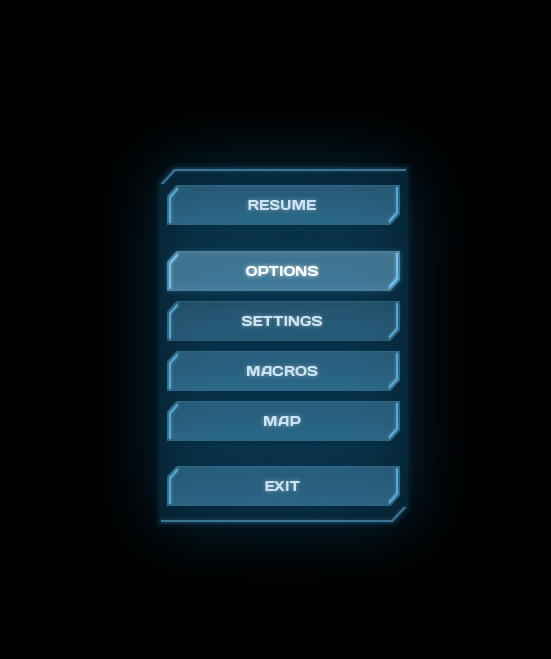
<style>
.page{position:relative;width:551px;height:659px;background:#000000}
.page>*{position:absolute;margin:0}
.t1{font:14px "Days";color:#cbe3f0;text-transform:uppercase}
.t2{font:14px "Days";color:#f9fdff;text-transform:uppercase}
</style>
<div class="page">
<p class="t1" style="left:248px;top:200px;width:68px;height:10px">Resume</p>
<p class="t2" style="left:246px;top:266px;width:72px;height:10px">Options</p>
<p class="t1" style="left:242px;top:316px;width:80px;height:10px">settings</p>
<p class="t1" style="left:247px;top:366px;width:71px;height:10px">Macros</p>
<p class="t1" style="left:264px;top:416px;width:37px;height:10px">Map</p>
<p class="t1" style="left:265px;top:481px;width:35px;height:10px">exit</p>
</div>
